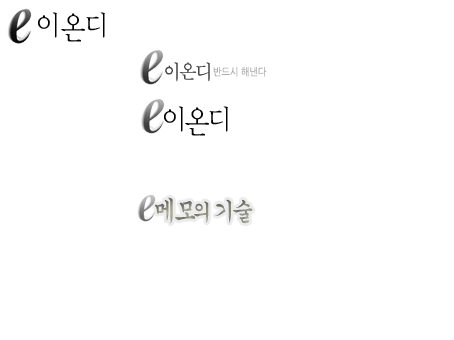
<style>
.page{position:relative;width:454px;height:340px;background:#ffffff}
.page>*{position:absolute;margin:0}
.t1{font:30px "YDIYMjO220";color:#000000;scale:0.9 1}
.t2{font:20px "BatangChe";letter-spacing:-0.1em;color:#434343;scale:0.9 1}
.t3{font:10px "NanumGothic";color:#acacac;scale:0.9 1}
.t4{font:26.4px "GungsuhChe";letter-spacing:-0.2em;scale:0.91 1}
.t5{font:22px "GungsuhChe";letter-spacing:-0.2em;scale:0.91 1}
.t6{font:24.2px "GungsuhChe";letter-spacing:-0.2em;scale:0.91 1}
</style>
<div class="page">
<p class="t1" style="left:38px;top:12px;width:19px;height:26px">이</p>
<p class="t1" style="left:61px;top:13px;width:24px;height:29px">온</p>
<p class="t1" style="left:86px;top:12px;width:19px;height:26px">디</p>
<p class="t2" style="left:165px;top:62px;width:45px;height:20px">이온디</p>
<p class="t3" style="left:213px;top:67px;width:54px;height:10px">반드시 해낸다</p>
<p class="t1" style="left:164px;top:106px;width:19px;height:26px">이</p>
<p class="t1" style="left:185px;top:107px;width:24px;height:29px">온</p>
<p class="t1" style="left:209px;top:106px;width:19px;height:26px">디</p>
<p class="t4" style="left:155px;top:197px;width:98px;height:27px">메모<span class="t5">의 </span><span class="t6">기술</span></p>
</div>
